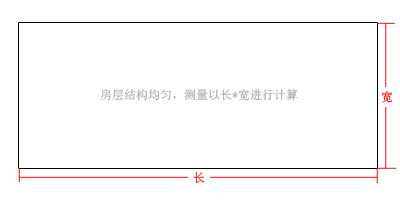
<style>
.page{position:relative;width:400px;height:200px;background:#ffffff}
.page>*{position:absolute;margin:0}
.t1{font:12px "SimSun";color:#aaaaaa}
.t2{font:12px "SimSun"}
</style>
<div class="page">
<p class="t1" style="left:100px;top:89px;width:198px;height:12px">房层结构均匀，测量以长*宽进行计算</p>
<p class="t2" style="left:382px;top:91px;width:10px;height:12px">宽</p>
<p class="t2" style="left:193px;top:172px;width:12px;height:11px">长</p>
</div>
